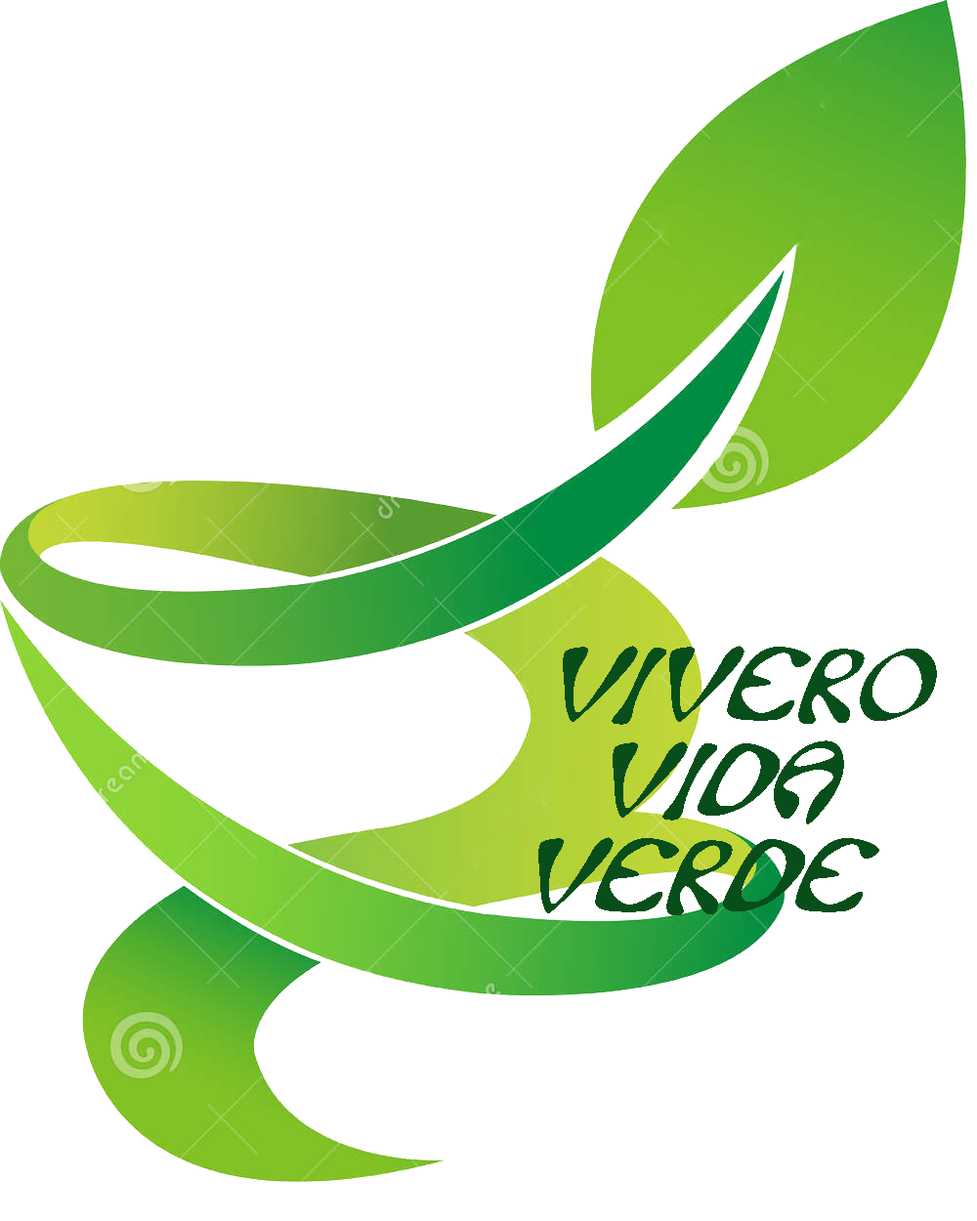
<style>
.page{position:relative;width:977px;height:1221px;background:#ffffff}
.page>*{position:absolute;margin:0}
.t1{font:97.7px/32.7px "AceCrikey";letter-spacing:-0.01em;color:#074e1b;font-style:italic;scale:1.2 1}
</style>
<div class="page">
<p class="t1" style="left:538px;top:646px;width:399px;height:269px;text-align:center">VIVERO<br><br><br>VIDA<br><br><br>VERDE</p>
</div>
